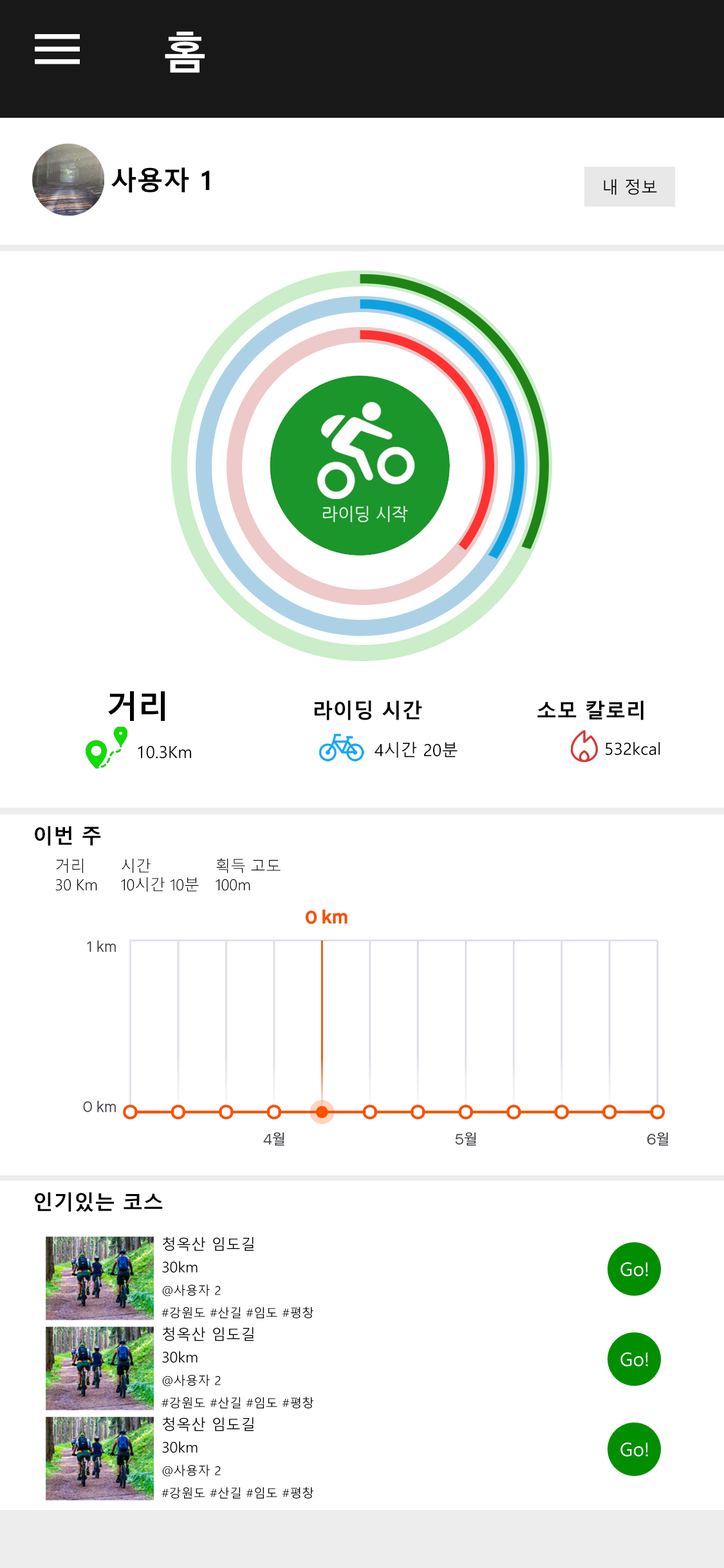
<style>
.page{position:relative;width:724px;height:1568px;background:#ffffff}
.page>*{position:absolute;margin:0}
.t1{font:26.4px "MalgunGothicBold";color:#000000}
.t2{font:16.7px "MalgunGothic";color:#000000}
.t3{font:31.5px "MalgunGothicBold";color:#000000}
.t4{font:20.6px "MalgunGothicBold";color:#000000}
.t5{font:15.4px "MalgunGothic-Semilight";color:#000000}
.t6{font:12.2px/22.5px "MalgunGothic";color:#000000}
.t7{font:14.8px/22.5px "MalgunGothic";color:#000000}
.t8{font:18.7px "MalgunGothic";color:#ffffff}
</style>
<div class="page">
<p class="t1" style="left:111px;top:167px;width:99px;height:25px">사용자 1</p>
<p class="t2" style="left:604px;top:179px;width:53px;height:16px">내 정보</p>
<p class="t3" style="left:108px;top:691px;width:57px;height:30px">거리</p>
<p class="t4" style="left:314px;top:700px;width:108px;height:20px">라이딩 시간</p>
<p class="t4" style="left:537px;top:700px;width:107px;height:20px">소모 칼로리</p>
<p class="t2" style="left:138px;top:745px;width:53px;height:13px">10.3Km</p>
<p class="t2" style="left:375px;top:742px;width:83px;height:16px">4시간 20분</p>
<p class="t2" style="left:606px;top:742px;width:54px;height:13px">532kcal</p>
<p class="t4" style="left:35px;top:826px;width:66px;height:20px">이번 주</p>
<p class="t5" style="left:55px;top:858px;width:42px;height:33px">거리<br>30 Km</p>
<p class="t5" style="left:121px;top:858px;width:78px;height:34px">시간<br>10시간 10분</p>
<p class="t5" style="left:216px;top:858px;width:65px;height:33px">획득 고도<br>100m</p>
<p class="t4" style="left:35px;top:1192px;width:128px;height:20px">인기있는 코스</p>
<p class="t6" style="left:162px;top:1237px;width:151px;height:81px"><span class="t7">청옥산 임도길<br>30km<br></span>@사용자 2<br>#강원도 #산길 #임도 #평창</p>
<p class="t8" style="left:621px;top:1262px;width:27px;height:14px">Go!</p>
<p class="t6" style="left:162px;top:1327px;width:151px;height:81px"><span class="t7">청옥산 임도길<br>30km<br></span>@사용자 2<br>#강원도 #산길 #임도 #평창</p>
<p class="t8" style="left:621px;top:1352px;width:27px;height:15px">Go!</p>
<p class="t6" style="left:162px;top:1417px;width:151px;height:81px"><span class="t7">청옥산 임도길<br>30km<br></span>@사용자 2<br>#강원도 #산길 #임도 #평창</p>
<p class="t8" style="left:621px;top:1442px;width:27px;height:15px">Go!</p>
</div>
